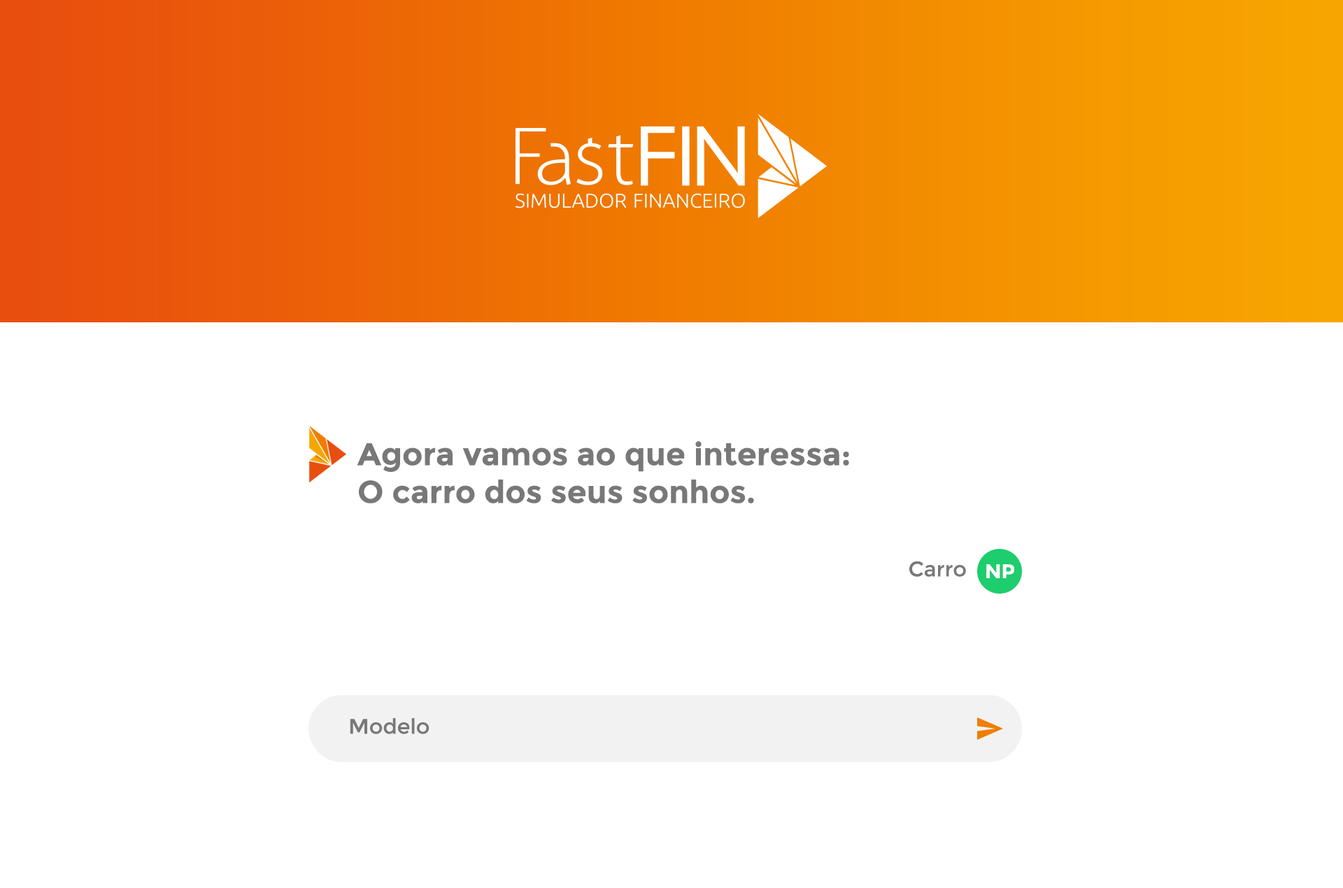
<style>
.page{position:relative;width:1343px;height:888px;background:#ffffff}
.page>*{position:absolute;margin:0}
.t1{font:31.5px/37.8px "Montserrat-Bold";color:#797878}
.t2{font:21px "Montserrat-Regular";color:#797878}
.t3{font:19.7px "Montserrat-Bold";color:#ffffff}
</style>
<div class="page">
<p class="t1" style="left:357px;top:441px;width:492px;height:62px">Agora vamos ao que interessa:<br>O carro dos seus sonhos.</p>
<p class="t2" style="left:909px;top:561px;width:57px;height:16px">Carro</p>
<p class="t3" style="left:986px;top:564px;width:28px;height:14px">NP</p>
<p class="t2" style="left:350px;top:718px;width:79px;height:16px">Modelo</p>
</div>
